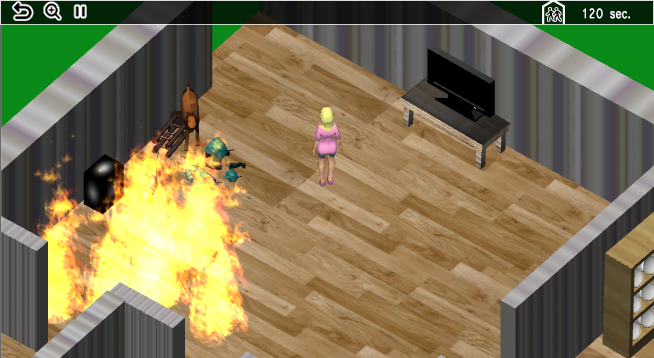
<style>
.page{position:relative;width:654px;height:358px}
.page>*{position:absolute;margin:0}
.t1{font:17.2px "Microsoft-Yi-Baiti";color:#ffffff;font-weight:bold;scale:0.81 1}
</style>
<div class="page">
<p class="t1" style="left:583px;top:8px;width:47px;height:11px">120 sec.</p>
</div>
